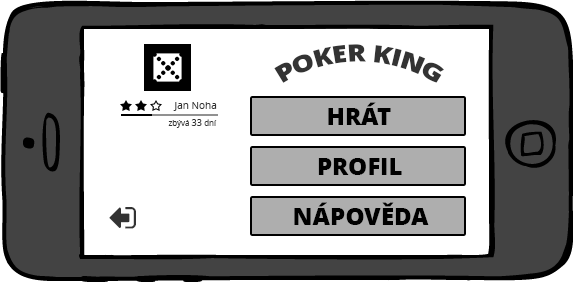
<style>
.page{position:relative;width:573px;height:282px;background:#ffffff}
.page>*{position:absolute;margin:0}
.t1{font:24px "OpenSans-Extrabold";color:#333333;text-transform:uppercase}
.t2{font:10px "OpenSans";color:#333333}
.t3{font:24px "OpenSans-Extrabold";color:#000000;text-transform:uppercase}
.t4{font:8px "OpenSans";color:#333333}
.t5{font:9px "OpenSans";color:#333333}
</style>
<div class="page">
<p class="t1" style="left:274px;top:44px;width:170px;height:39px">Poker king</p>
<p class="t2" style="left:173px;top:102px;width:44px;height:9px">Jan Noha</p>
<p class="t3" style="left:328px;top:102px;width:63px;height:23px">Hrát</p>
<p class="t4" style="left:168px;top:119px;width:49px;height:9px">zbývá <span class="t5">33 </span>dní</p>
<p class="t3" style="left:318px;top:158px;width:84px;height:17px">Profil</p>
<p class="t3" style="left:294px;top:202px;width:135px;height:23px">Nápověda</p>
</div>
